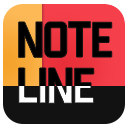
<style>
.page{position:relative;width:128px;height:128px;background:#121212}
.page>*{position:absolute;margin:0}
.t1{font:43.8px/46.7px "NewFont-Regular";letter-spacing:0.025em;color:#000000}
</style>
<div class="page">
<p class="t1" style="left:18px;top:21px;width:94px;height:83px">NOTE<br>LINE</p>
</div>
